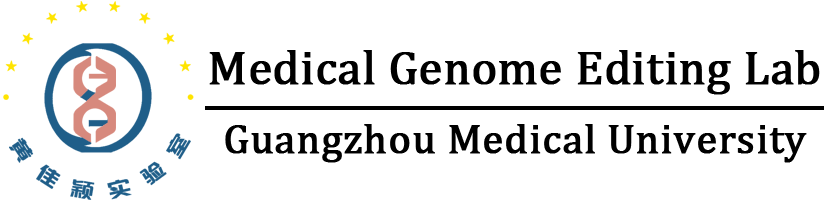
<style>
.page{position:relative;width:830px;height:200px;background:#ffffff}
.page>*{position:absolute;margin:0}
.t1{font:42.4px/44.8px "Cambria";color:#000000;font-weight:bold}
.t2{font:47.8px/27.8px "Cambria";color:#000000;font-weight:bold}
.t3{font:61.8px/44.8px "Candara";color:#000000}
</style>
<div class="page">
<p class="t1" style="left:205px;top:50px;width:619px;height:113px;text-align:center"><span class="t2">Medical Genome Editing Lab<br></span><span class="t3">——————————<br></span>Guangzhou Medical University</p>
</div>
